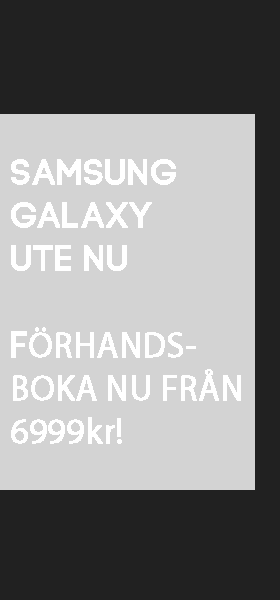
<style>
.page{position:relative;width:280px;height:600px;background:#d3d3d3}
.page>*{position:absolute;margin:0}
.t1{font:36px "MyriadPro-Regular";color:#ffffff;font-weight:bold;scale:0.96 1}
.t2{font:36px "FSPDEMO-CodeProRegular";color:#ffffff;font-weight:bold;scale:0.96 1}
</style>
<div class="page">
<p class="t1" style="left:11px;top:159px;width:230px;height:285px"><span class="t2">SAMSUNG<br>GALAXY<br>UTE NU<br><br>F</span>ÖRHANDS-<br>BOKA NU FRÅN<br>6999kr!</p>
</div>
